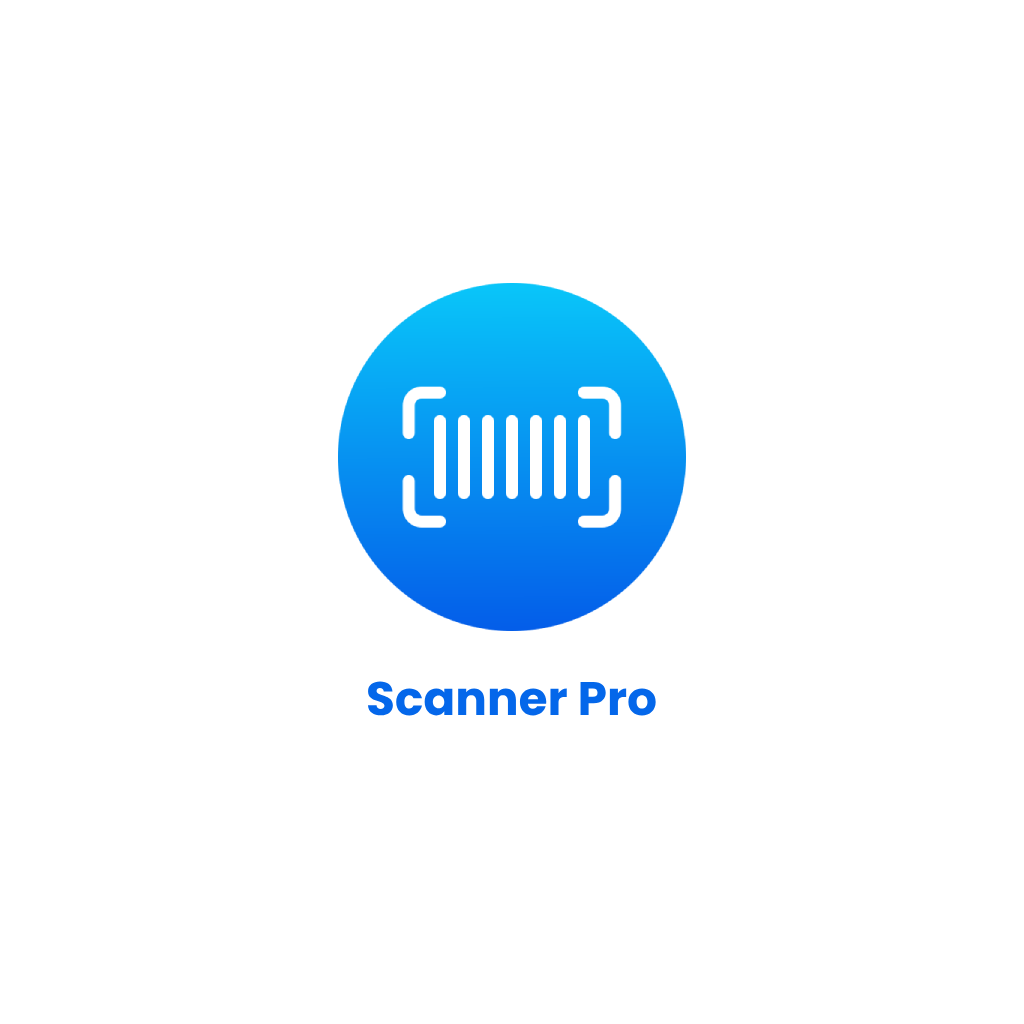
<style>
.page{position:relative;width:1024px;height:1024px;background:#ffffff}
.page>*{position:absolute;margin:0}
.t1{font:47px "Poppins-Bold";color:#0467ea}
</style>
<div class="page">
<p class="t1" style="left:367px;top:681px;width:289px;height:35px">Scanner Pro</p>
</div>
